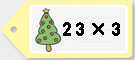
<style>
.page{position:relative;width:135px;height:60px;background:#f5f5f5}
.page>*{position:absolute;margin:0}
.t1{font:18.3px "¿¬Ìå";letter-spacing:0.2em;color:#070104;font-weight:bold}
</style>
<div class="page">
<p class="t1" style="left:63px;top:22px;width:57px;height:14px">23×3</p>
</div>
